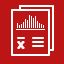
<style>
.page{position:relative;width:64px;height:64px;background:#bc1515}
.page>*{position:absolute;margin:0}
.t1{font:12px "Junegull-Regular";color:#ffffff;scale:1.2 1}
</style>
<div class="page">
<p class="t1" style="left:17px;top:41px;width:8px;height:8px">x</p>
</div>
